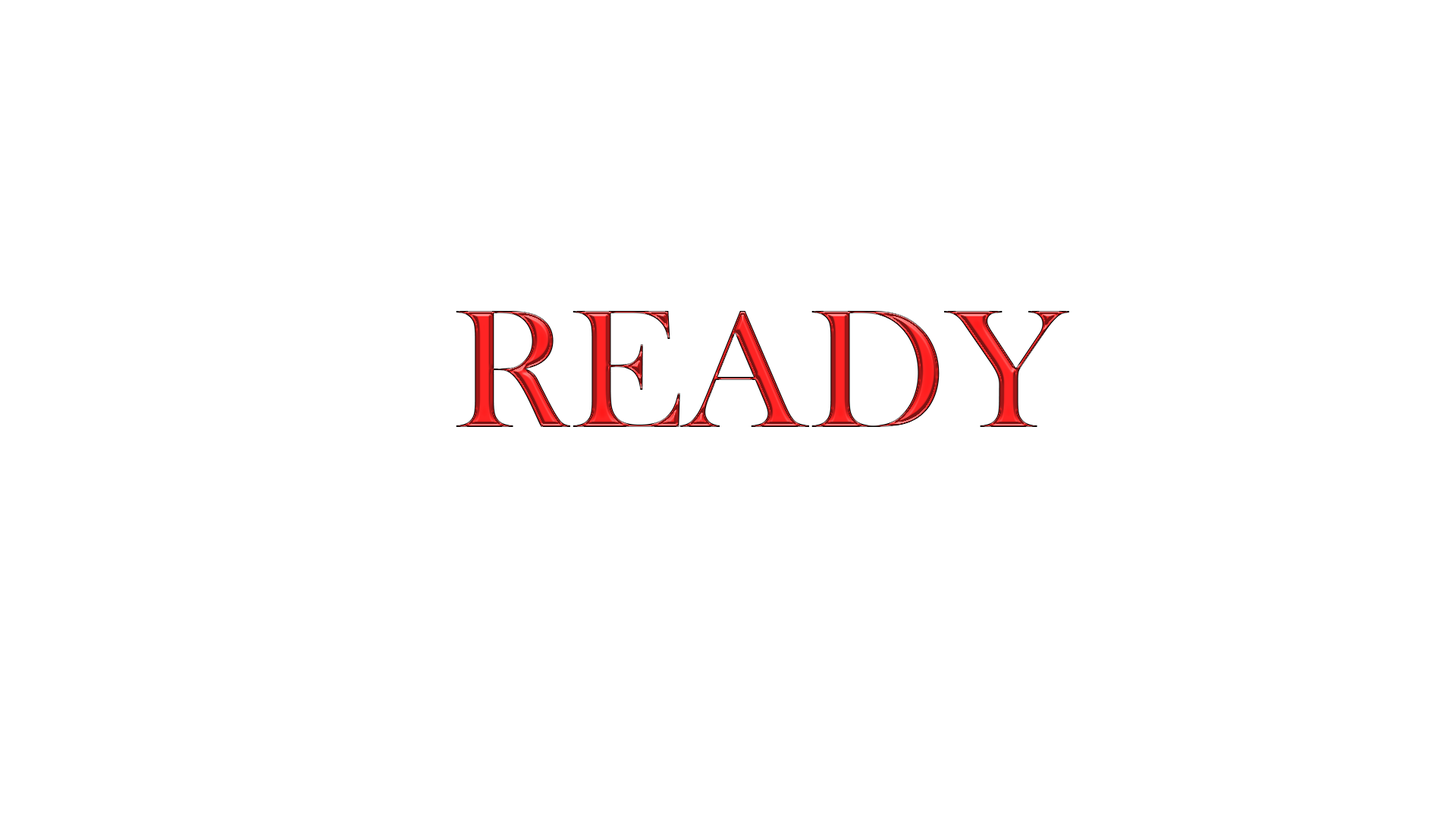
<style>
.page{position:relative;width:1456px;height:819px;background:#ffffff}
.page>*{position:absolute;margin:0}
.t1{font:174.4px "BaskOldFace";scale:1.04 1}
</style>
<div class="page">
<p class="t1" style="left:456px;top:311px;width:613px;height:116px">READY</p>
</div>
